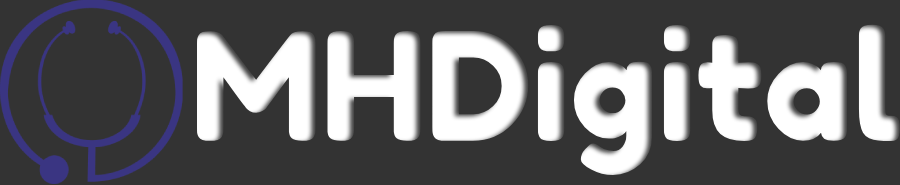
<style>
.page{position:relative;width:900px;height:185px;background:#333333}
.page>*{position:absolute;margin:0}
.t1{font:150px "FredokaOne-Regular";color:#ffffff}
</style>
<div class="page">
<p class="t1" style="left:197px;top:24px;width:703px;height:152px">MHDigital</p>
</div>
